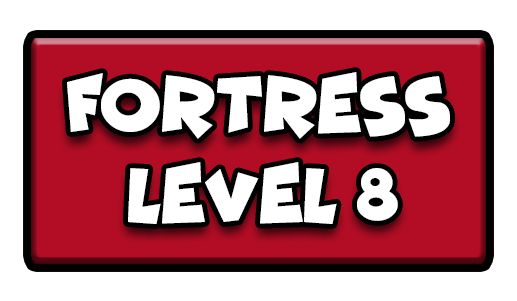
<style>
.page{position:relative;width:517px;height:301px;background:#ffffff}
.page>*{position:absolute;margin:0}
.t1{font:77.7px "Funhouse";color:#ffffff;scale:0.95 1}
</style>
<div class="page">
<p class="t1" style="left:67px;top:72px;width:383px;height:67px">FORTRESS</p>
<p class="t1" style="left:128px;top:162px;width:270px;height:62px">LEVEL 8</p>
</div>
